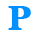
<style>
.page{position:relative;width:37px;height:37px;background:#ffffff}
.page>*{position:absolute;margin:0}
.t1{font:36px "Baskerville-Bold";color:#0090ff}
</style>
<div class="page">
<p class="t1" style="left:8px;top:6px;width:23px;height:24px">P</p>
</div>
